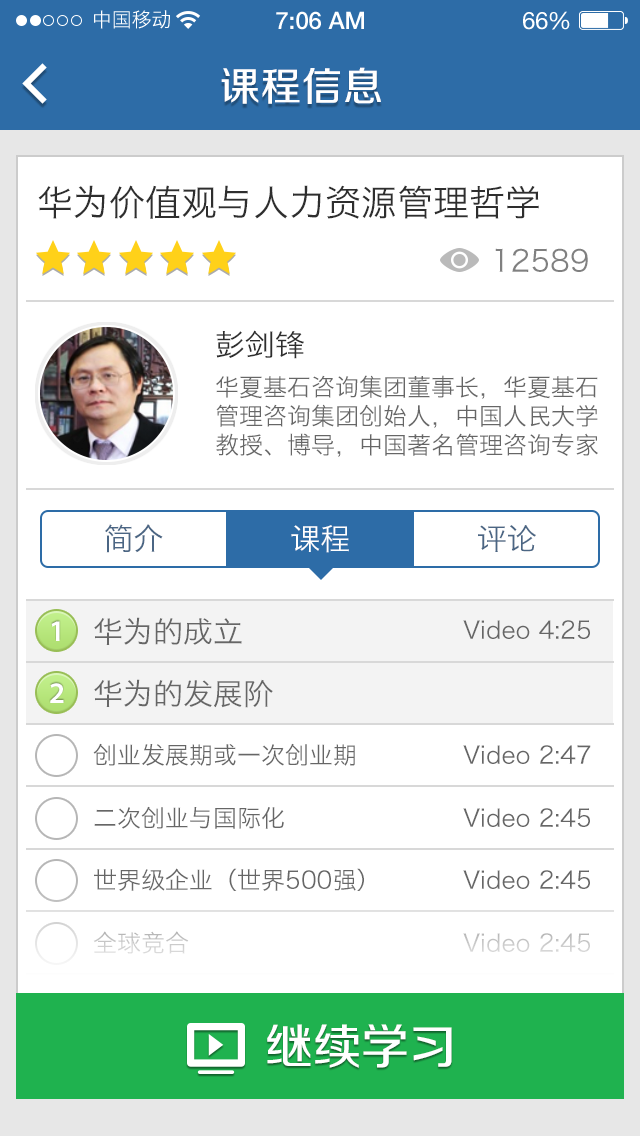
<style>
.page{position:relative;width:640px;height:1136px;background:#ffffff}
.page>*{position:absolute;margin:0}
.t1{font:20px "HiraginoSansGB-W3";color:#ffffff}
.t2{font:24px "HelveticaNeue-Medium";color:#ffffff}
.t3{font:24px "HelveticaNeue";color:#ffffff}
.t4{font:24px "HelveticaNeue";letter-spacing:-0.02em;color:#ffffff}
.t5{font:40px "FZZZHUNHJW--GB1-0";letter-spacing:0.025em;color:#ffffff}
.t6{font:36px "HiraginoSansGB-W3";color:#2e2e2e}
.t7{font:30px "HiraginoSansGB-W3";color:#808080}
.t8{font:30px "HiraginoSansGB-W3";color:#2e2e2e}
.t9{font:24px "HiraginoSansGB-W3";color:#666666}
.t10{font:30px "HiraginoSansGB-W3";color:#4b6684}
.t11{font:30px "HiraginoSansGB-W3";color:#ffffff}
.t12{font:30px "HiraginoSansGB-W3";color:#666666}
.t13{font:30px "MyriadPro-Semibold";color:#ffffff}
.t14{font:24px "HiraginoSansGB-W3";color:#cbcbcb}
.t15{font:24px "HiraginoSansGB-W3";color:#cacaca}
.t16{font:48px "FZZZHUNHJW--GB1-0";color:#ffffff}
</style>
<div class="page">
<p class="t1" style="left:94px;top:10px;width:76px;height:19px">中国移动</p>
<p class="t2" style="left:276px;top:11px;width:88px;height:19px">7:06 AM</p>
<p class="t3" style="left:523px;top:11px;width:47px;height:19px">6<span class="t4">6</span>%</p>
<p class="t5" style="left:221px;top:67px;width:160px;height:37px">课程信息</p>
<p class="t6" style="left:38px;top:185px;width:501px;height:34px">华为价值观与人力资源管理哲学</p>
<p class="t7" style="left:495px;top:248px;width:93px;height:24px">12589</p>
<p class="t8" style="left:216px;top:330px;width:88px;height:29px">彭剑锋</p>
<p class="t9" style="left:216px;top:375px;width:382px;height:82px">华夏基石咨询集团董事长，华夏基石管理咨询集团创始人，中国人民大学教授、博导，中国著名管理咨询专家。</p>
<p class="t10" style="left:105px;top:524px;width:58px;height:29px">简介</p>
<p class="t11" style="left:291px;top:525px;width:58px;height:28px">课程</p>
<p class="t10" style="left:478px;top:525px;width:58px;height:27px">评论</p>
<p class="t12" style="left:94px;top:617px;width:148px;height:28px">华为的成立</p>
<p class="t13" style="left:51px;top:621px;width:9px;height:20px">1</p>
<p class="t9" style="left:463px;top:620px;width:127px;height:19px">Video 4:25</p>
<p class="t13" style="left:50px;top:683px;width:14px;height:20px">2</p>
<p class="t12" style="left:94px;top:679px;width:179px;height:29px">华为的发展阶</p>
<p class="t9" style="left:93px;top:743px;width:262px;height:23px">创业发展期或一次创业期</p>
<p class="t9" style="left:463px;top:745px;width:128px;height:19px">Video 2:47</p>
<p class="t9" style="left:94px;top:806px;width:190px;height:23px">二次创业与国际化</p>
<p class="t9" style="left:463px;top:808px;width:127px;height:19px">Video 2:45</p>
<p class="t9" style="left:94px;top:868px;width:270px;height:23px">世界级企业（世界500强）</p>
<p class="t9" style="left:463px;top:870px;width:127px;height:19px">Video 2:45</p>
<p class="t14" style="left:93px;top:931px;width:96px;height:23px">全球竞合</p>
<p class="t15" style="left:463px;top:933px;width:127px;height:19px">Video 2:45</p>
<p class="t16" style="left:267px;top:1024px;width:185px;height:44px">继续学习</p>
</div>
